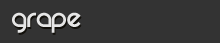
<style>
.page{position:relative;width:220px;height:43px;background:#333333}
.page>*{position:absolute;margin:0}
.t1{font:32px "REZ";color:#e6e6e6}
</style>
<div class="page">
<p class="t1" style="left:12px;top:12px;width:69px;height:21px">GRAPE</p>
</div>
